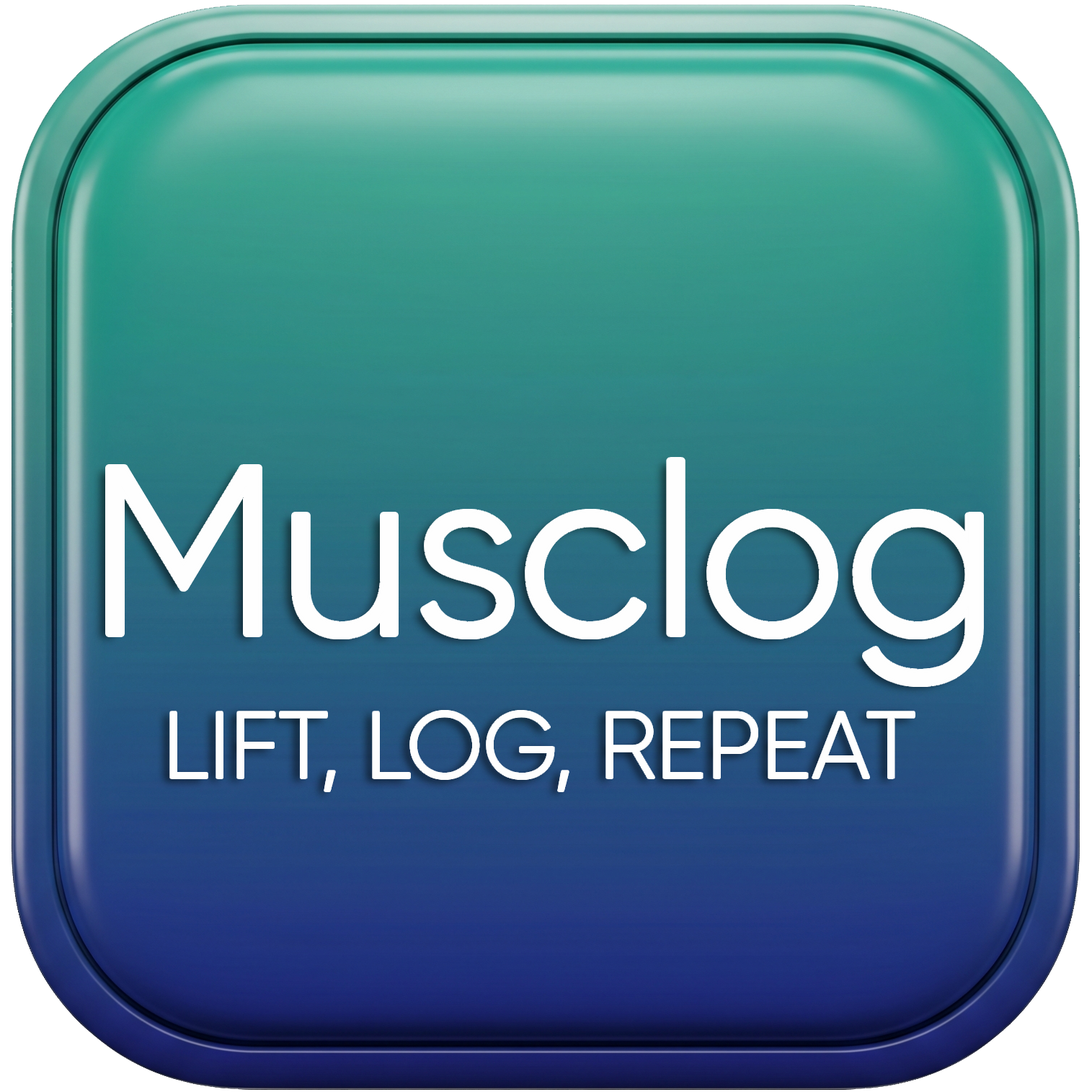
<style>
.page{position:relative;width:1092px;height:1092px}
.page>*{position:absolute;margin:0}
.t1{font:237.2px "Gilroy-Light";color:#fefefe}
.t2{font:93.5px "Gilroy-Light";color:#fefefe}
</style>
<div class="page">
<p class="t1" style="left:108px;top:460px;width:872px;height:224px">Musclog</p>
<p class="t2" style="left:171px;top:711px;width:744px;height:80px">LIFT, LOG, REPEAT</p>
</div>
